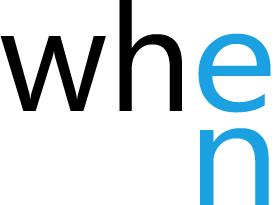
<style>
.page{position:relative;width:274px;height:205px;background:#ffffff}
.page>*{position:absolute;margin:0}
.t1{font:150px "SegoeUI";color:#000000}
.t2{font:150px "SegoeUI";color:#1ba0e1;scale:1.1 1}
</style>
<div class="page">
<p class="t1" style="left:0px;top:0px;width:182px;height:111px">wh</p>
<p class="t2" style="left:198px;top:33px;width:73px;height:80px">e</p>
<p class="t2" style="left:200px;top:128px;width:69px;height:77px">n</p>
</div>
